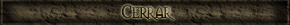
<style>
.page{position:relative;width:290px;height:25px}
.page>*{position:absolute;margin:0}
.t1{font:17px "Morpheus"}
</style>
<div class="page">
<p class="t1" style="left:121px;top:5px;width:55px;height:15px">Cerrar</p>
</div>
